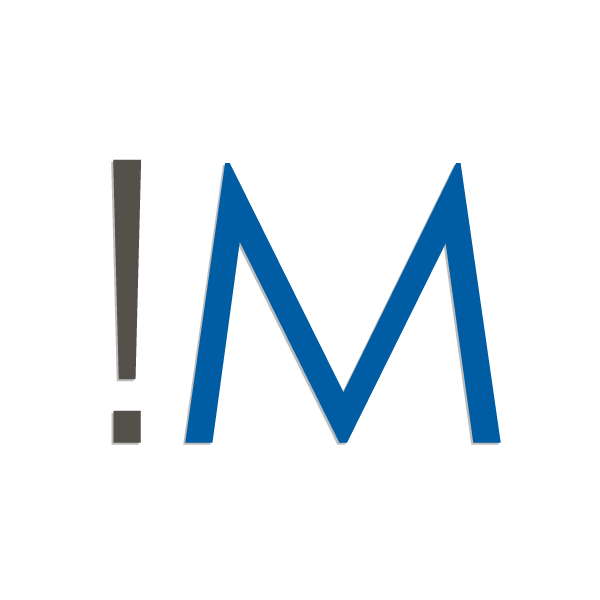
<style>
.page{position:relative;width:600px;height:600px;background:#ffffff}
.page>*{position:absolute;margin:0}
.t1{font:370px "AgencyFB-Reg";color:#54504a}
.t2{font:389px "CenturyGothic";letter-spacing:-0.1em;color:#005ca3}
</style>
<div class="page">
<p class="t1" style="left:113px;top:159px;width:388px;height:284px">!<span class="t2">M</span></p>
</div>
